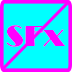
<style>
.page{position:relative;width:72px;height:72px;background:#00ffff}
.page>*{position:absolute;margin:0}
.t1{font:30px "Broadway";color:#ff00ff}
</style>
<div class="page">
<p class="t1" style="left:6px;top:25px;width:60px;height:22px">SFx</p>
</div>
